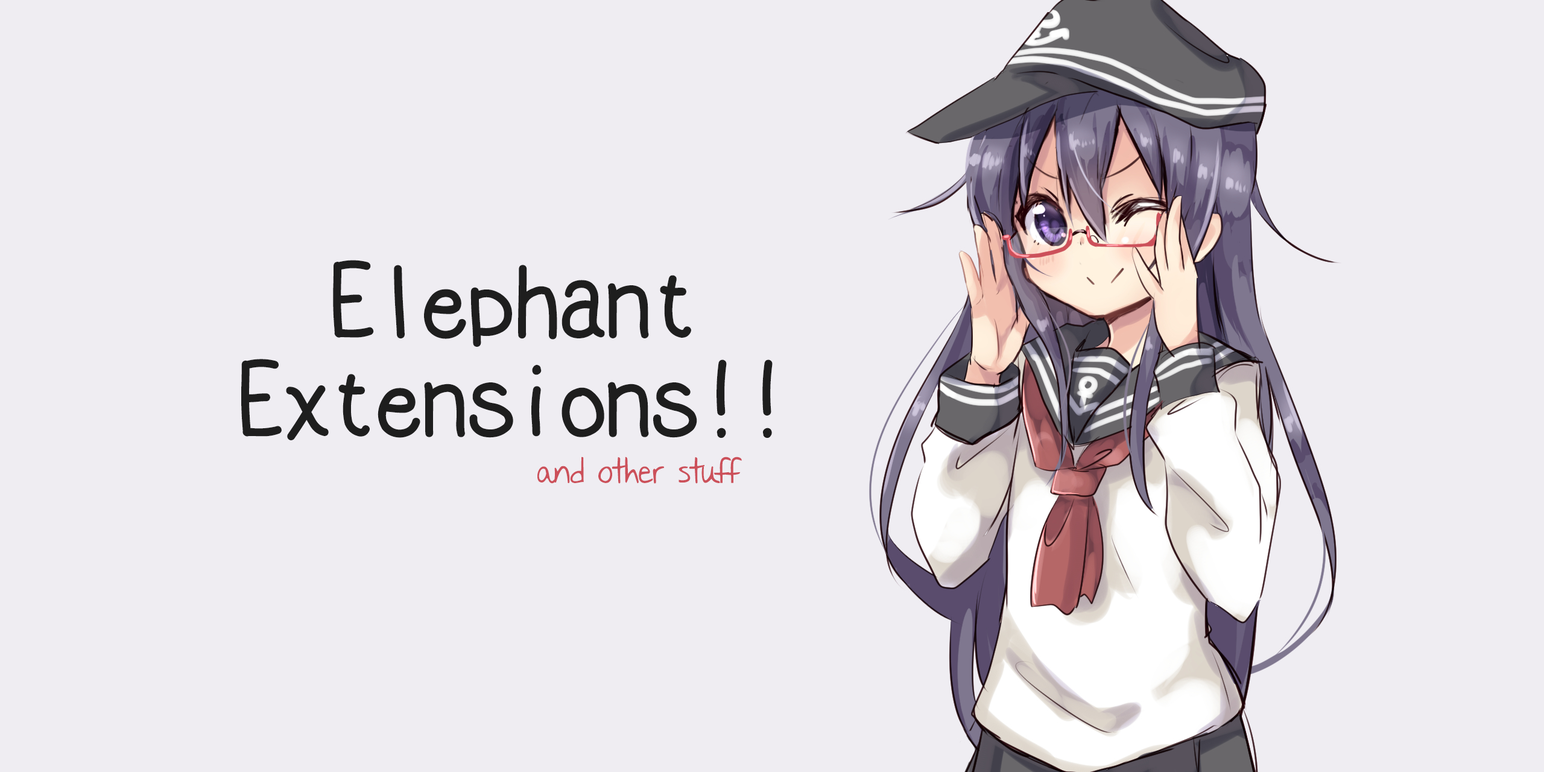
<style>
.page{position:relative;width:1544px;height:772px;background:#efedf2}
.page>*{position:absolute;margin:0}
.t1{font:99.8px/98.8px "YuzuPopA_M_Bold";letter-spacing:-0.04em;color:#1e1e1e}
.t2{font:28.7px "NothingYouCouldSay";letter-spacing:-0.015em;color:#cc505a}
</style>
<div class="page">
<p class="t1" style="left:241px;top:260px;width:532px;height:180px;text-align:center">Elephant<br>Extensions!!</p>
<p class="t2" style="left:537px;top:457px;width:205px;height:27px">and other stuff</p>
</div>
